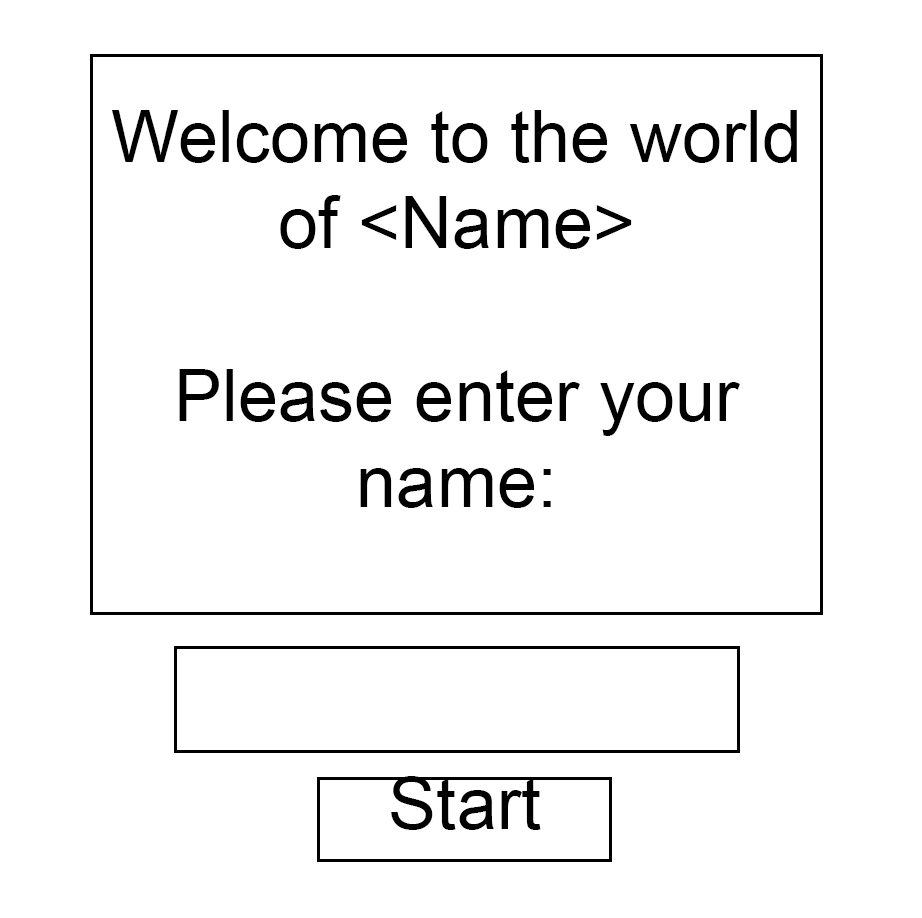
<style>
.page{position:relative;width:922px;height:918px;background:#ffffff}
.page>*{position:absolute;margin:0}
.t1{font:72px "ArialMT";color:#000000}
.t2{font:30px "ArialMT";color:#000000}
</style>
<div class="page">
<p class="t1" style="left:112px;top:110px;width:685px;height:398px;text-align:center"><span class="t2"><br></span>Welcome to the world of &lt;Name&gt;<br><br>Please enter your name:</p>
<p class="t1" style="left:391px;top:776px;width:150px;height:54px">Start</p>
</div>
